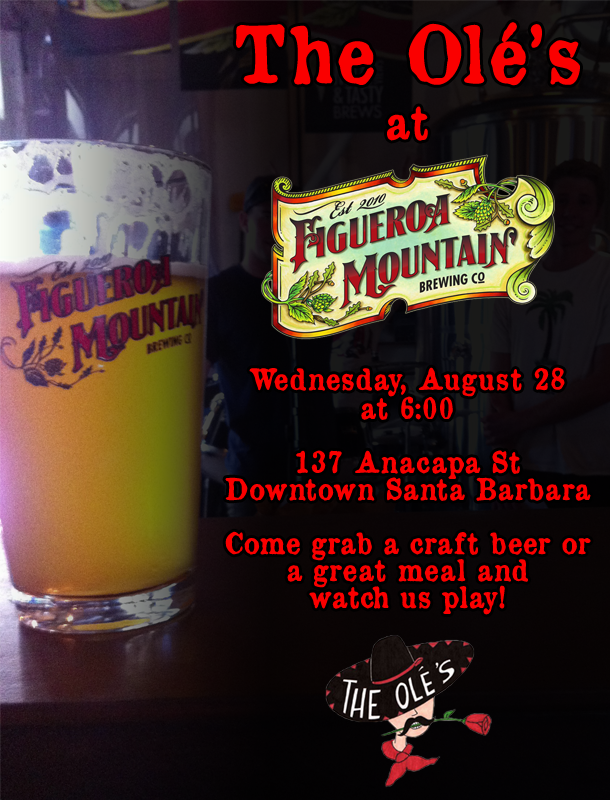
<style>
.page{position:relative;width:610px;height:800px}
.page>*{position:absolute;margin:0}
.t1{font:28px/27px "OldNewspaperTypes";color:#fa0000;font-weight:bold}
.t2{font:75px/28.5px "OldNewspaperTypes";color:#fa0000;font-weight:bold}
.t3{font:44px/56.5px "OldNewspaperTypes";color:#fa0000;font-weight:bold}
.t4{font:28px/81.5px "OldNewspaperTypes";color:#fa0000;font-weight:bold}
.t5{font:28px/29px "OldNewspaperTypes";color:#fa0000;font-weight:bold}
</style>
<div class="page">
<p class="t1" style="left:225px;top:22px;width:366px;height:593px;text-align:center"><span class="t2">The Olé’s<br></span><span class="t3">at<br><br><br><br></span><span class="t4">Wednesday, August 28<br></span><span class="t5">at 6:00<br></span><br>137 Anacapa St<br>Downtown Santa Barbara<br><br>Come grab a craft beer or<br>a great meal and<br>watch us play!</p>
</div>
